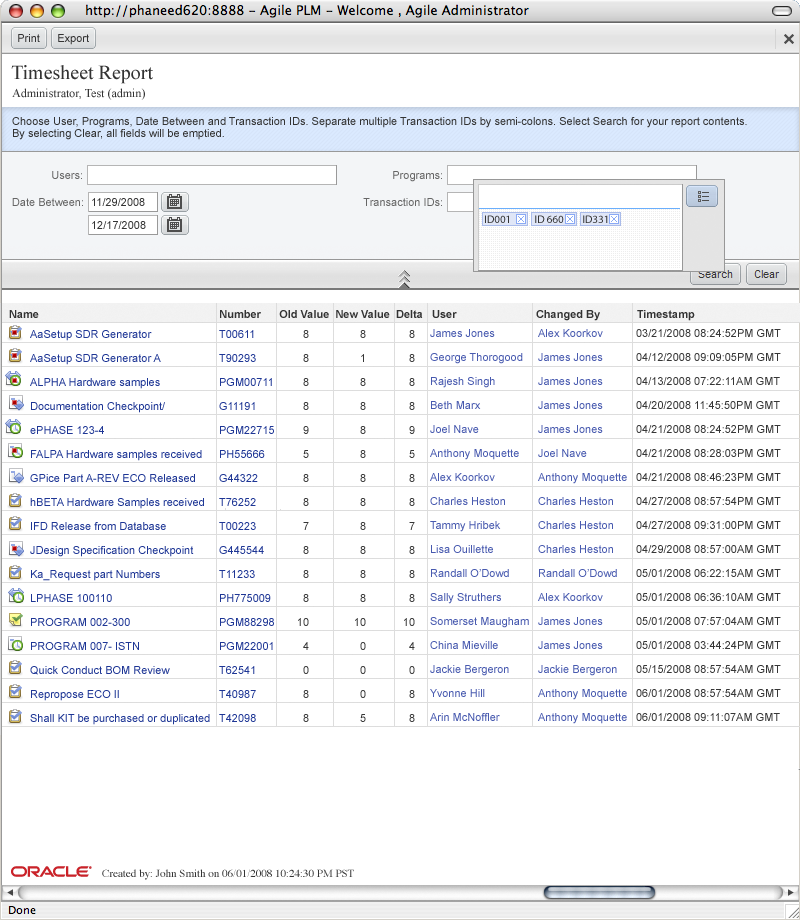
<style>
.page{position:relative;width:800px;height:920px;background:#ffffff}
.page>*{position:absolute;margin:0}
.t1{font:11px "ArialMT";color:#333333}
.t2{font:20px "TimesNewRomanPSMT";color:#333333}
.t3{font:12px "TimesNewRomanPSMT";color:#333333}
.t4{font:11px/12px "ArialMT";color:#333333}
.t5{font:11px "ArialMT";color:#666666}
.t6{font:11px "MyriadPro-Regular";color:#333333}
.t7{font:11px "Arial-BoldMT";color:#333333}
.t8{font:11px/24px "ArialMT";color:#485aaf}
.t9{font:11px/24px "ArialMT";color:#363636}
.t10{font:11px/24px "ArialMT";color:#1e3695}
.t11{font:11px "Times-Roman";color:#333333}
</style>
<div class="page">
<p class="t1" style="left:18px;top:34px;width:22px;height:8px">Print</p>
<p class="t1" style="left:58px;top:34px;width:31px;height:11px">Export</p>
<p class="t2" style="left:11px;top:65px;width:142px;height:19px">Timesheet Report</p>
<p class="t3" style="left:12px;top:88px;width:133px;height:12px">Administrator, Test (admin)</p>
<p class="t4" style="left:12px;top:117px;width:735px;height:23px">Choose User, Programs, Date Between and Transaction IDs. Separate multiple Transaction IDs by semi-colons. Select Search for your report contents.<br>By selecting Clear, all fields will be emptied.</p>
<p class="t5" style="left:52px;top:171px;width:30px;height:8px">Users:</p>
<p class="t5" style="left:393px;top:171px;width:49px;height:11px">Programs:</p>
<p class="t5" style="left:12px;top:198px;width:71px;height:8px">Date Between:</p>
<p class="t1" style="left:92px;top:198px;width:53px;height:8px">11/29/2008</p>
<p class="t5" style="left:363px;top:198px;width:79px;height:8px">Transaction IDs:</p>
<p class="t1" style="left:92px;top:221px;width:54px;height:8px">12/17/2008</p>
<p class="t6" style="left:485px;top:215px;width:123px;height:8px">ID001          ID 660        ID331</p>
<p class="t7" style="left:9px;top:310px;width:686px;height:11px">Name                                                           Number      Old Value  New Value  Delta   User                          Changed By            Timestamp</p>
<p class="t8" style="left:430px;top:329px;width:99px;height:392px">James Jones<br>George Thorogood<br>Rajesh Singh<br>Beth Marx<br>Joel Nave<br>Anthony Moquette<br>Alex Koorkov<br>Charles Heston<br>Tammy Hribek<br>Lisa Ouillette<br>Randall O’Dowd<br>Sally Struthers<br>Somerset Maugham<br>China Mieville<br>Jackie Bergeron<br>Yvonne Hill<br>Arin McNoffler</p>
<p class="t8" style="left:538px;top:329px;width:89px;height:395px">Alex Koorkov<br>James Jones<br>James Jones<br>James Jones<br>James Jones<br>Joel Nave<br>Anthony Moquette<br>Charles Heston<br>Charles Heston<br>Charles Heston<br>Randall O’Dowd<br>Alex Koorkov<br>James Jones<br>James Jones<br>Jackie Bergeron<br>Anthony Moquette<br>Anthony Moquette</p>
<p class="t9" style="left:636px;top:329px;width:145px;height:392px">03/21/2008 08:24:52PM GMT<br>04/12/2008 09:09:05PM GMT<br>04/13/2008 07:22:11AM GMT<br>04/20/2008 11:45:50PM GMT<br>04/21/2008 08:24:52PM GMT<br>04/21/2008 08:28:03PM GMT<br>04/21/2008 08:46:23PM GMT<br>04/27/2008 08:57:54PM GMT<br>04/27/2008 09:31:00PM GMT<br>04/29/2008 08:57:00AM GMT<br>05/01/2008 06:22:15AM GMT<br>05/01/2008 06:36:10AM GMT<br>05/01/2008 07:57:04AM GMT<br>05/01/2008 03:44:24PM GMT<br>05/15/2008 08:57:54AM GMT<br>06/01/2008 08:57:54AM GMT<br>06/01/2008 09:11:07AM GMT</p>
<p class="t10" style="left:30px;top:330px;width:180px;height:395px">AaSetup SDR Generator<br>AaSetup SDR Generator A<br>ALPHA Hardware samples<br>Documentation Checkpoint/<br>ePHASE 123-4<br>FALPA Hardware samples received<br>GPice Part A-REV ECO Released<br>hBETA Hardware Samples received<br>IFD Release from Database<br>JDesign Specification Checkpoint<br>Ka_Request part Numbers<br>LPHASE 100110<br>PROGRAM 002-300<br>PROGRAM 007- ISTN<br>Quick Conduct BOM Review<br>Repropose ECO II<br>Shall KIT be purchased or duplicated</p>
<p class="t10" style="left:219px;top:330px;width:55px;height:392px">T00611<br>T90293<br>PGM00711<br>G11191<br>PGM22715<br>PH55666<br>G44322<br>T76252<br>T00223<br>G445544<br>T11233<br>PH775009<br>PGM88298<br>PGM22001<br>T62541<br>T40987<br>T42098</p>
<p class="t9" style="left:298px;top:330px;width:11px;height:392px;text-align:right">8<br>8<br>8<br>8<br>9<br>5<br>8<br>8<br>7<br>8<br>8<br>8<br>10<br>4<br>0<br>8<br>8</p>
<p class="t9" style="left:355px;top:330px;width:11px;height:392px;text-align:right">8<br>1<br>8<br>8<br>8<br>8<br>8<br>8<br>8<br>8<br>8<br>8<br>10<br>0<br>0<br>0<br>5</p>
<p class="t9" style="left:404px;top:330px;width:11px;height:392px;text-align:right">8<br>8<br>8<br>8<br>9<br>5<br>8<br>8<br>7<br>8<br>8<br>8<br>10<br>4<br>0<br>8<br>8</p>
<p class="t11" style="left:102px;top:869px;width:252px;height:11px">Created by: John Smith on 06/01/2008 10:24:30 PM PST</p>
</div>
